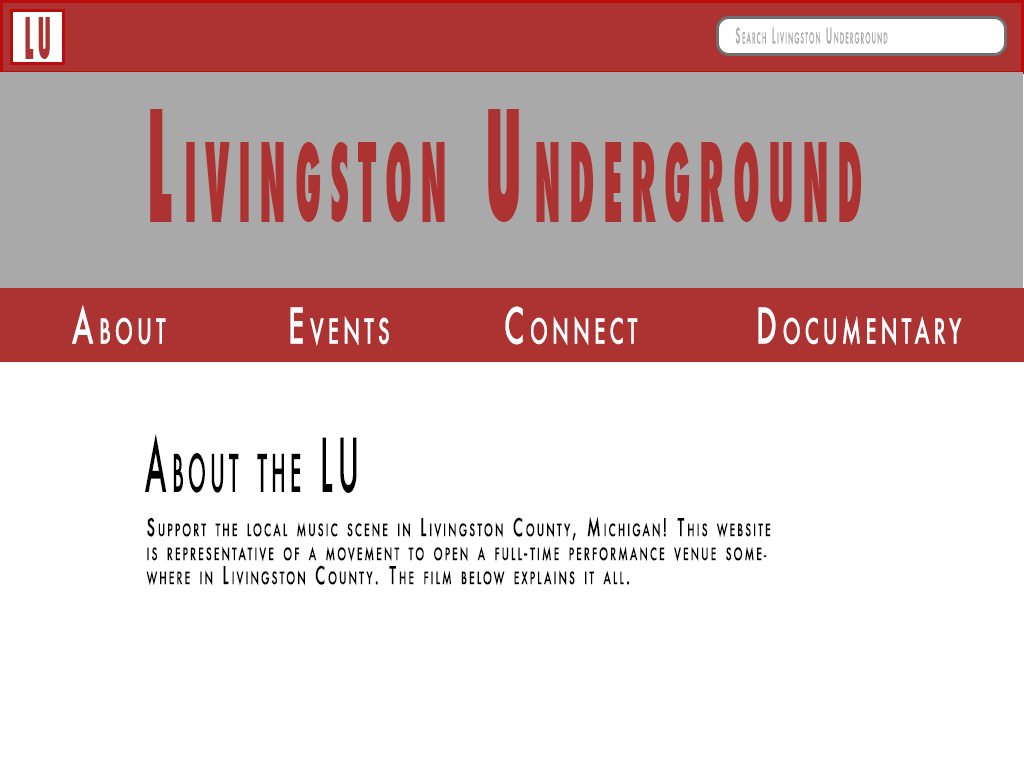
<style>
.page{position:relative;width:1024px;height:768px;background:#ffffff}
.page>*{position:absolute;margin:0}
.t1{font:54px "Futura-CondensedExtraBold";letter-spacing:0.2em;color:#ad3232;font-variant:small-caps;scale:0.4 1}
.t2{font:21px "Futura-Medium";letter-spacing:0.2em;color:#aba9a9;font-variant:small-caps;scale:0.4 1}
.t3{font:150px "Futura-CondensedExtraBold";letter-spacing:0.2em;color:#ad3232;font-variant:small-caps;scale:0.4 1}
.t4{font:48px "Futura-Medium";letter-spacing:0.2em;color:#ffffff;font-variant:small-caps;scale:0.6 1}
.t5{font:72px "Futura-Medium";letter-spacing:0.2em;color:#000000;font-variant:small-caps;scale:0.4 1}
.t6{font:24px/24px "Futura-Medium";letter-spacing:0.2em;color:#000000;font-variant:small-caps;scale:0.6 1}
</style>
<div class="page">
<p class="t1" style="left:25px;top:17px;width:25px;height:42px">LU</p>
<p class="t2" style="left:735px;top:27px;width:153px;height:18px">Search Livingston Underground</p>
<p class="t3" style="left:150px;top:109px;width:712px;height:113px">Livingston Underground</p>
<p class="t4" style="left:72px;top:305px;width:890px;height:41px">About    Events    Connect    Documentary</p>
<p class="t5" style="left:145px;top:434px;width:212px;height:59px">About the LU</p>
<p class="t6" style="left:146px;top:516px;width:625px;height:70px">Support the local music scene in Livingston County, Michigan! This website is representative of a movement to open a full-time performance venue somewhere in Livingston County. The film below explains it all.</p>
</div>
